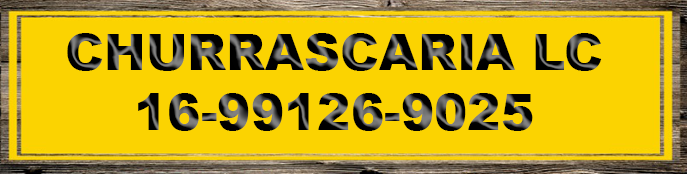
<style>
.page{position:relative;width:687px;height:174px;background:#fbd301}
.page>*{position:absolute;margin:0}
.t1{font:50px "Arial-Black"}
</style>
<div class="page">
<p class="t1" style="left:67px;top:33px;width:535px;height:38px">CHURRASCARIA LC</p>
<p class="t1" style="left:138px;top:93px;width:395px;height:38px">16-99126-9025</p>
</div>
